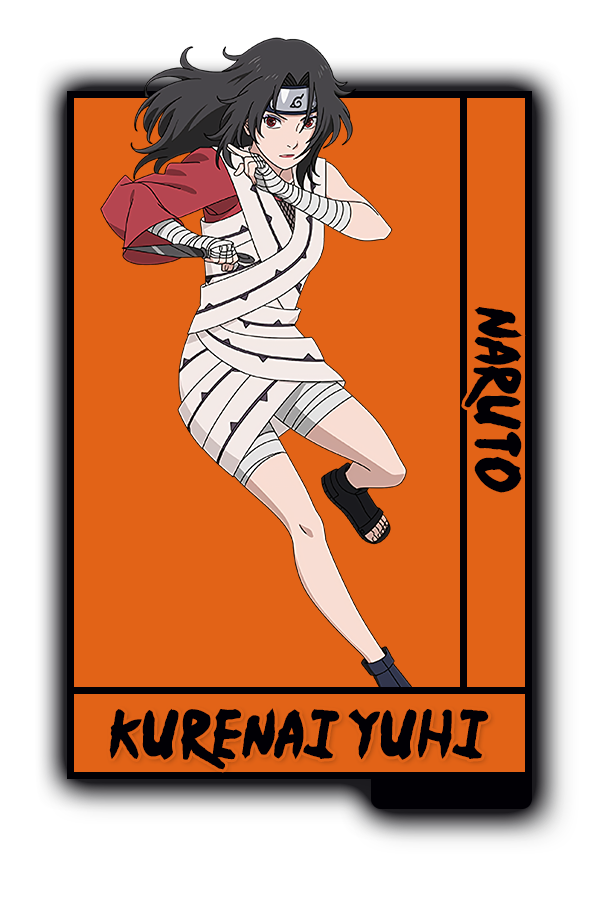
<style>
.page{position:relative;width:600px;height:900px;background:#e26317}
.page>*{position:absolute;margin:0}
.t1{font:52px "Ninja-Naruto";color:#010005}
.t2{font:55.4px "Ninja-Naruto";color:#010005}
</style>
<div class="page">
<p class="t1" style="left:464px;top:307px;width:59px;height:186px;rotate:90deg">Naruto</p>
<p class="t2" style="left:109px;top:708px;width:380px;height:62px">Kurenai Yuhi</p>
</div>
